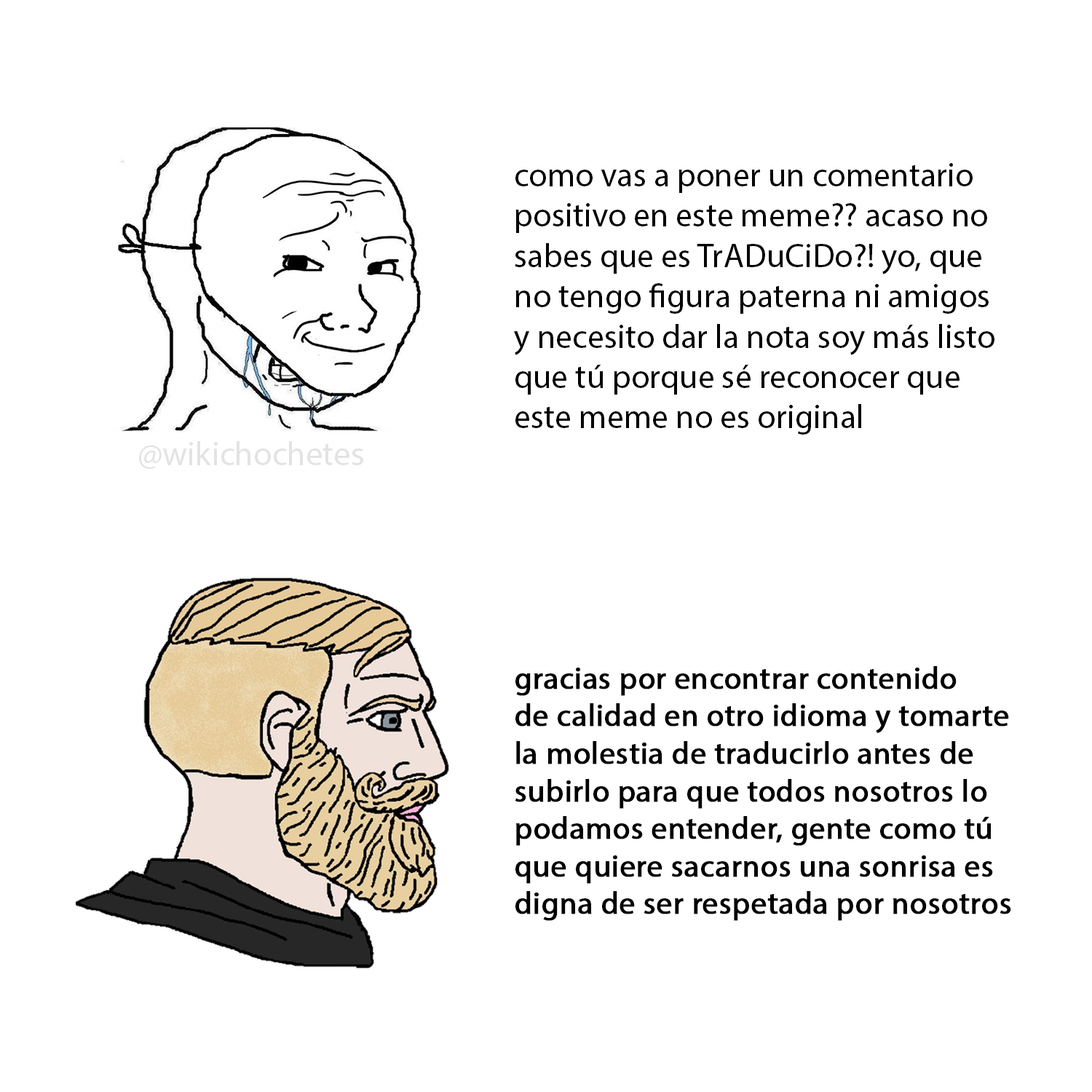
<style>
.page{position:relative;width:1092px;height:1092px;background:#ffffff}
.page>*{position:absolute;margin:0}
.t1{font:33.6px "MyriadPro-Regular";color:#000000}
.t2{font:33.8px "MyriadPro-Regular";color:#e3e3e3}
.t3{font:31.3px "MyriadPro-Regular";color:#000000;font-weight:bold}
</style>
<div class="page">
<p class="t1" style="left:514px;top:163px;width:480px;height:272px">como vas a poner un comentario<br>positivo en este meme?? acaso no<br>sabes que es TrADuCiDo?! yo, que<br>no tengo figura paterna ni amigos<br>y necesito dar la nota soy más listo<br>que tú porque sé reconocer que<br>este meme no es original</p>
<p class="t2" style="left:139px;top:441px;width:224px;height:28px">@wikichochetes</p>
<p class="t3" style="left:515px;top:666px;width:496px;height:255px">gracias por encontrar contenido<br>de calidad en otro idioma y tomarte<br>la molestia de traducirlo antes de<br>subirlo para que todos nosotros lo<br>podamos entender, gente como tú<br>que quiere sacarnos una sonrisa es<br>digna de ser respetada por nosotros</p>
</div>
